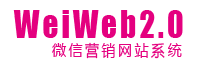
<style>
.page{position:relative;width:200px;height:63px;background:#ffffff}
.page>*{position:absolute;margin:0}
.t1{font:35px "Impact";letter-spacing:0.1em;color:#e4007f;scale:0.88 1}
.t2{font:15.8px "MicrosoftYaHei";letter-spacing:0.18em;color:#e4007f;scale:0.88 1}
</style>
<div class="page">
<p class="t1" style="left:13px;top:10px;width:170px;height:28px">WeiWeb2.0</p>
<p class="t2" style="left:52px;top:42px;width:130px;height:17px">微信营销网站系统</p>
</div>
